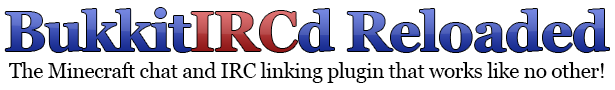
<style>
.page{position:relative;width:615px;height:90px;background:#ffffff}
.page>*{position:absolute;margin:0}
.t1{font:56px "Georgia-Bold";letter-spacing:-0.02em}
.t2{font:21px "Georgia";letter-spacing:-0.02em;color:#000000}
</style>
<div class="page">
<p class="t1" style="left:5px;top:8px;width:604px;height:44px">BukkitIRCd Reloaded</p>
<p class="t2" style="left:9px;top:62px;width:595px;height:21px">The Minecraft chat and IRC linking plugin that works like no other!</p>
</div>
